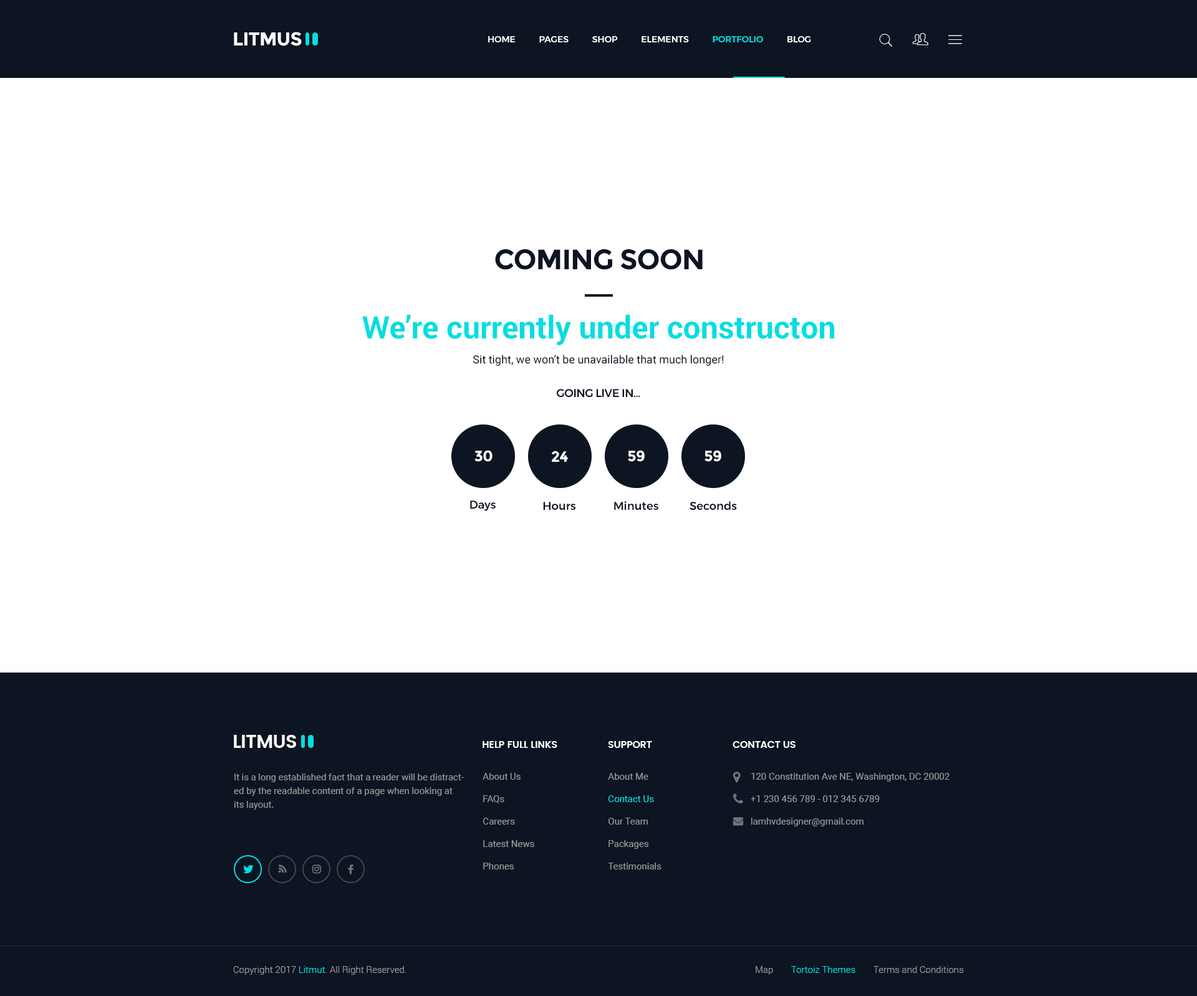
<style>
.page{position:relative;width:1197px;height:996px;background:#ffffff}
.page>*{position:absolute;margin:0}
.t1{font:18.7px "Montserrat-Bold";letter-spacing:-0.025em;color:#ffffff;text-transform:uppercase}
.t2{font:8.7px "Montserrat-Medium";color:#ffffff;text-transform:uppercase}
.t3{font:8.7px "Montserrat-Medium";color:#03dedf;text-transform:uppercase}
.t4{font:28.1px "Montserrat-Bold";letter-spacing:-0.025em;color:#0d1422;text-transform:uppercase}
.t5{font:31.2px "Roboto-Bold";color:#03dedf}
.t6{font:11.2px "Roboto-Regular";color:#0d1422}
.t7{font:11.2px "Montserrat-Medium";letter-spacing:-0.025em;color:#0d1422}
.t8{font:15px "Montserrat-Bold";letter-spacing:-0.025em;color:#ffffff}
.t9{font:11.2px "Montserrat-Medium";color:#0d1422}
.t10{font:18.7px "Poppins-SemiBold";letter-spacing:-0.025em;color:#ffffff;text-transform:uppercase}
.t11{font:10px "Poppins-SemiBold";letter-spacing:-0.025em;color:#ffffff;text-transform:uppercase}
.t12{font:9.4px/13.7px "Roboto-Regular";color:#999999}
.t13{font:9.4px/22.4px "Roboto-Regular";color:#999999}
.t14{font:9.4px/22.4px "Roboto-Regular";color:#03dedf}
.t15{font:9.4px "Roboto-Light";color:#999999}
.t16{font:9.4px "Roboto-Light";color:#03dedf}
</style>
<div class="page">
<p class="t1" style="left:234px;top:32px;width:68px;height:14px">Litmus</p>
<p class="t2" style="left:488px;top:36px;width:323px;height:6px">HOME           PAGES           SHOP           ELEMENTS           <span class="t3">PORTFOLIO</span>           BLOG</p>
<p class="t4" style="left:495px;top:249px;width:208px;height:21px">Coming Soon</p>
<p class="t5" style="left:362px;top:315px;width:473px;height:30px">We’re currently under constructon</p>
<p class="t6" style="left:473px;top:355px;width:251px;height:11px">Sit tight, we won’t be unavailable that much longer!</p>
<p class="t7" style="left:556px;top:389px;width:84px;height:9px">GOING LIVE IN…</p>
<p class="t8" style="left:474px;top:450px;width:18px;height:12px">30</p>
<p class="t8" style="left:551px;top:451px;width:17px;height:11px">24</p>
<p class="t8" style="left:628px;top:450px;width:17px;height:12px">59</p>
<p class="t8" style="left:704px;top:450px;width:17px;height:12px">59</p>
<p class="t9" style="left:470px;top:501px;width:26px;height:10px">Days</p>
<p class="t9" style="left:543px;top:502px;width:33px;height:8px">Hours</p>
<p class="t9" style="left:614px;top:501px;width:44px;height:9px">Minutes</p>
<p class="t9" style="left:689px;top:501px;width:48px;height:10px">Seconds</p>
<p class="t10" style="left:234px;top:735px;width:62px;height:13px">Litmus</p>
<p class="t11" style="left:483px;top:741px;width:74px;height:7px">Help full links</p>
<p class="t11" style="left:608px;top:741px;width:44px;height:7px">Support</p>
<p class="t11" style="left:733px;top:741px;width:62px;height:7px">Contact Us</p>
<p class="t12" style="left:234px;top:774px;width:230px;height:36px">It is a long established fact that a reader will be distracted by the readable content of a page when looking at its layout.</p>
<p class="t13" style="left:483px;top:773px;width:51px;height:97px">About Us<br>FAQs<br>Careers<br>Latest News<br>Phones</p>
<p class="t13" style="left:608px;top:773px;width:53px;height:97px">About Me<br><span class="t14">Contact Us<br></span>Our Team<br>Packages<br>Testimonials</p>
<p class="t13" style="left:751px;top:773px;width:198px;height:54px">120 Constitution Ave NE, Washington, DC 20002<br>+1 230 456 789 - 012 345 6789<br>lamhvdesigner@gmail.com</p>
<p class="t15" style="left:233px;top:966px;width:173px;height:9px">Copyright 2017 <span class="t16">Litmut</span>. All Right Reserved.</p>
<p class="t15" style="left:756px;top:966px;width:17px;height:9px">Map</p>
<p class="t16" style="left:791px;top:966px;width:64px;height:7px">Tortoiz Themes</p>
<p class="t15" style="left:873px;top:966px;width:91px;height:7px">Terms and Conditions</p>
</div>
